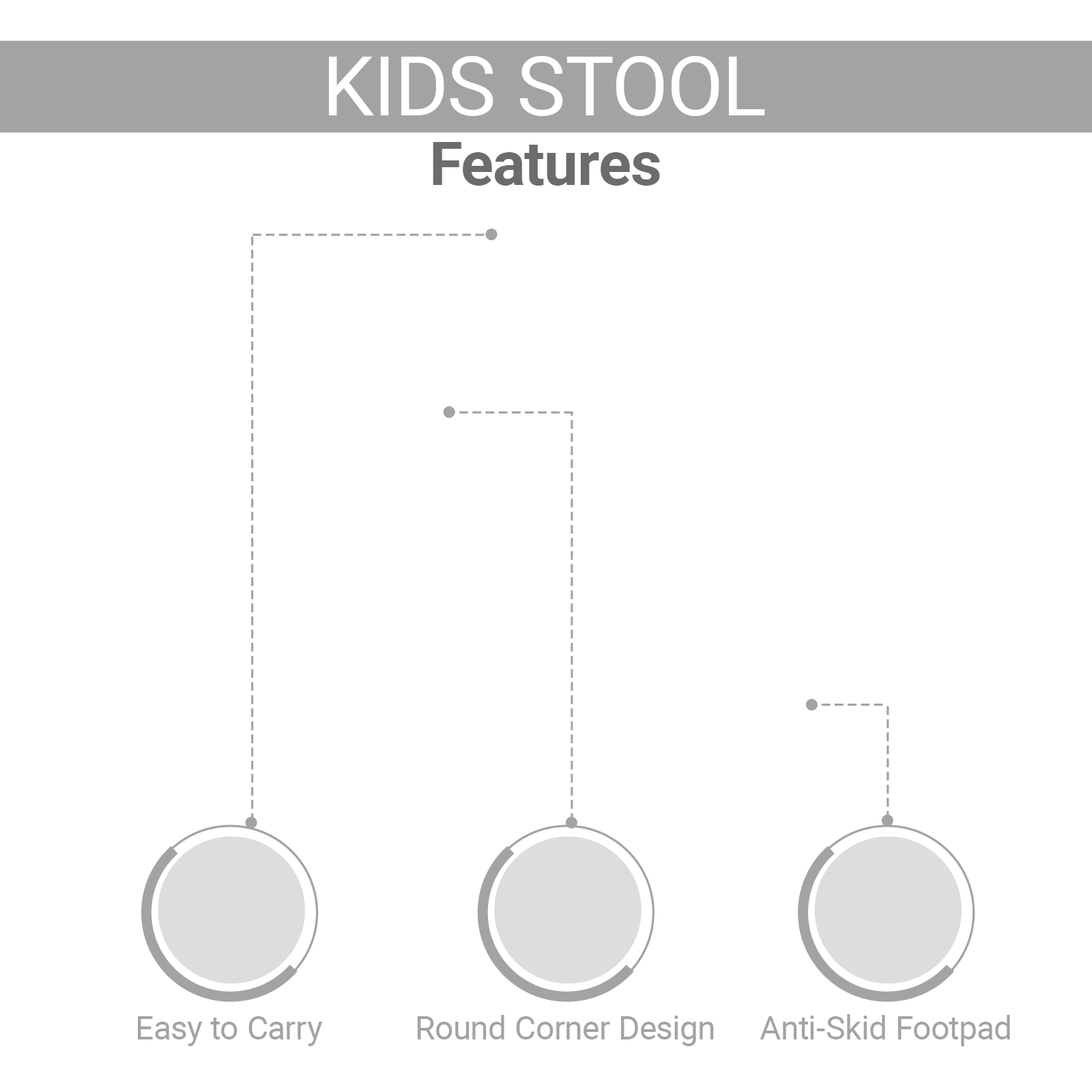
<style>
.page{position:relative;width:1092px;height:1092px;background:#ffffff}
.page>*{position:absolute;margin:0}
.t1{font:82.5px "Roboto-Regular";color:#ffffff}
.t2{font:60.4px "Roboto-Bold";color:#6c6c6c}
.t3{font:32.8px "Roboto-Regular";color:#a3a3a3}
</style>
<div class="page">
<p class="t1" style="left:328px;top:56px;width:437px;height:60px">KIDS STOOL</p>
<p class="t2" style="left:433px;top:142px;width:227px;height:44px">Features</p>
<p class="t3" style="left:138px;top:1016px;width:185px;height:30px">Easy to Carry</p>
<p class="t3" style="left:417px;top:1015px;width:297px;height:31px">Round Corner Design</p>
<p class="t3" style="left:760px;top:1014px;width:250px;height:32px">Anti-Skid Footpad</p>
</div>
